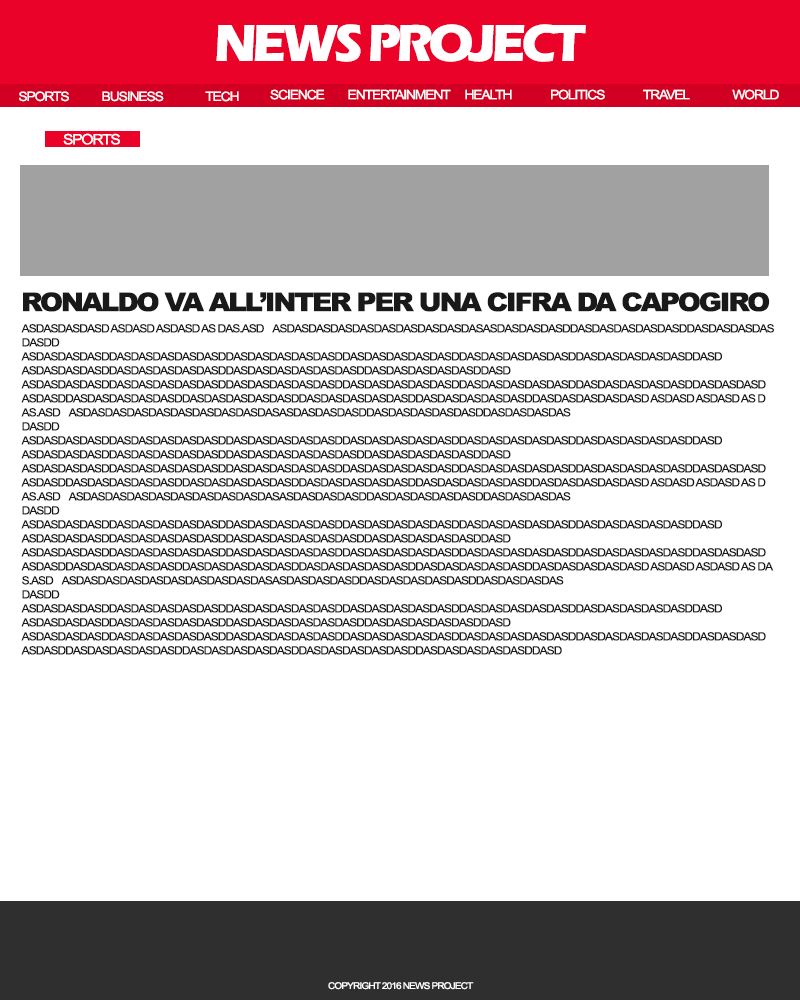
<style>
.page{position:relative;width:800px;height:1000px;background:#ffffff}
.page>*{position:absolute;margin:0}
.t1{font:53.7px "ErasITC-Bold";letter-spacing:-0.08em;color:#ffffff;scale:0.96 1}
.t2{font:13px "ArialMT";letter-spacing:-0.08em;color:#ffffff;scale:1.07 1}
.t3{font:14.4px "ArialMT";letter-spacing:-0.08em;color:#ffffff;scale:1.09 1}
.t4{font:25.8px "Arial-Black";letter-spacing:-0.08em;color:#191919;scale:1.08 1}
.t5{font:11.3px/14px "ArialMT";letter-spacing:-0.08em;color:#191919;scale:1.06 1}
.t6{font:9.3px "ArialMT";letter-spacing:-0.08em;color:#ffffff;scale:1.07 1}
</style>
<div class="page">
<p class="t1" style="left:216px;top:24px;width:370px;height:38px">NEWS PROJECT</p>
<p class="t2" style="left:270px;top:89px;width:55px;height:11px">SCIENCE</p>
<p class="t2" style="left:348px;top:89px;width:103px;height:11px">ENTERTAINMENT</p>
<p class="t2" style="left:465px;top:89px;width:47px;height:11px">HEALTH</p>
<p class="t2" style="left:551px;top:89px;width:54px;height:11px">POLITICS</p>
<p class="t2" style="left:643px;top:89px;width:47px;height:11px">TRAVEL</p>
<p class="t2" style="left:732px;top:89px;width:47px;height:11px">WORLD</p>
<p class="t2" style="left:19px;top:91px;width:50px;height:11px">SPORTS</p>
<p class="t2" style="left:102px;top:91px;width:62px;height:11px">BUSINESS</p>
<p class="t2" style="left:205px;top:91px;width:34px;height:11px">TECH</p>
<p class="t3" style="left:63px;top:133px;width:57px;height:12px">SPORTS</p>
<p class="t4" style="left:23px;top:292px;width:747px;height:20px">RONALDO VA ALL’INTER PER UNA CIFRA DA CAPOGIRO</p>
<p class="t5" style="left:21px;top:324px;width:753px;height:331px">ASDASDASDASD ASDASD ASDASD AS DAS.ASD    ASDASDASDASDASDASDASDASDASDASASDASDASDASDDASDASDASDASDASDDASDASDASDAS<br>DASDD<br>ASDASDASDASDDASDASDASDASDASDDASDASDASDASDASDDASDASDASDASDASDDASDASDASDASDASDDASDASDASDASDASDDASD<br>ASDASDASDASDDASDASDASDASDASDDASDASDASDASDASDASDDASDASDASDASDASDDASD<br>ASDASDASDASDDASDASDASDASDASDDASDASDASDASDASDDASDASDASDASDASDDASDASDASDASDASDDASDASDASDASDASDDASDASDASD<br>ASDASDDASDASDASDASDASDDASDASDASDASDASDDASDASDASDASDASDDASDASDASDASDASDDASDASDASDASDASD ASDASD ASDASD AS D<br>AS.ASD    ASDASDASDASDASDASDASDASDASDASASDASDASDASDDASDASDASDASDASDDASDASDASDAS<br>DASDD<br>ASDASDASDASDDASDASDASDASDASDDASDASDASDASDASDDASDASDASDASDASDDASDASDASDASDASDDASDASDASDASDASDDASD<br>ASDASDASDASDDASDASDASDASDASDDASDASDASDASDASDASDDASDASDASDASDASDDASD<br>ASDASDASDASDDASDASDASDASDASDDASDASDASDASDASDDASDASDASDASDASDDASDASDASDASDASDDASDASDASDASDASDDASDASDASD<br>ASDASDDASDASDASDASDASDDASDASDASDASDASDDASDASDASDASDASDDASDASDASDASDASDDASDASDASDASDASD ASDASD ASDASD AS D<br>AS.ASD    ASDASDASDASDASDASDASDASDASDASASDASDASDASDDASDASDASDASDASDDASDASDASDAS<br>DASDD<br>ASDASDASDASDDASDASDASDASDASDDASDASDASDASDASDDASDASDASDASDASDDASDASDASDASDASDDASDASDASDASDASDDASD<br>ASDASDASDASDDASDASDASDASDASDDASDASDASDASDASDASDDASDASDASDASDASDDASD<br>ASDASDASDASDDASDASDASDASDASDDASDASDASDASDASDDASDASDASDASDASDDASDASDASDASDASDDASDASDASDASDASDDASDASDASD<br>ASDASDDASDASDASDASDASDDASDASDASDASDASDDASDASDASDASDASDDASDASDASDASDASDDASDASDASDASDASD ASDASD ASDASD AS DA<br>S.ASD    ASDASDASDASDASDASDASDASDASDASASDASDASDASDDASDASDASDASDASDDASDASDASDAS<br>DASDD<br>ASDASDASDASDDASDASDASDASDASDDASDASDASDASDASDDASDASDASDASDASDDASDASDASDASDASDDASDASDASDASDASDDASD<br>ASDASDASDASDDASDASDASDASDASDDASDASDASDASDASDASDDASDASDASDASDASDDASD<br>ASDASDASDASDDASDASDASDASDASDDASDASDASDASDASDDASDASDASDASDASDDASDASDASDASDASDDASDASDASDASDASDDASDASDASD<br>ASDASDDASDASDASDASDASDDASDASDASDASDASDDASDASDASDASDASDDASDASDASDASDASDDASD</p>
<p class="t6" style="left:328px;top:982px;width:146px;height:8px">COPYRIGHT 2016 NEWS PROJECT</p>
</div>
